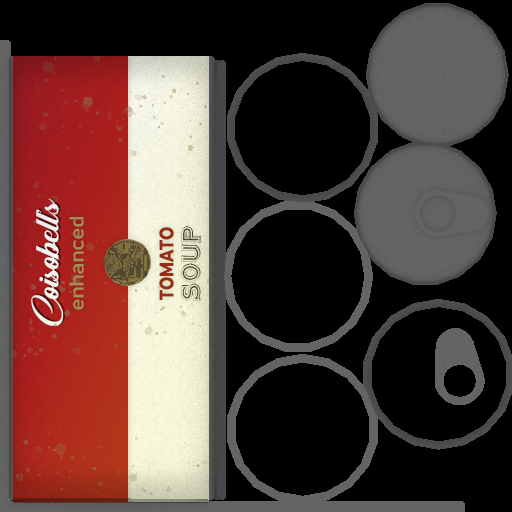
<style>
.page{position:relative;width:512px;height:512px;background:#000000}
.page>*{position:absolute;margin:0}
.t1{font:38.9px "Sunshine";letter-spacing:-0.037em;color:#ffffff;scale:1.19 1}
.t2{font:19.9px "Bahnschrift";letter-spacing:-0.037em;color:#a89460;scale:1.19 1}
.t3{font:19.9px "Montserrat-ExtraBold";letter-spacing:-0.005em;color:#921a1a;scale:0.79 1}
.t4{font:19.9px "Altea";letter-spacing:-0.037em;color:#323232;scale:0.79 1}
</style>
<div class="page">
<p class="t1" style="left:31px;top:198px;width:32px;height:128px;rotate:-90deg">Coisobell’s</p>
<p class="t2" style="left:69px;top:217px;width:15px;height:93px;rotate:-90deg">enhanced</p>
<p class="t3" style="left:159px;top:227px;width:15px;height:73px;rotate:-90deg">TOMATO</p>
<p class="t4" style="left:181px;top:226px;width:20px;height:75px;rotate:-90deg">soup</p>
</div>
